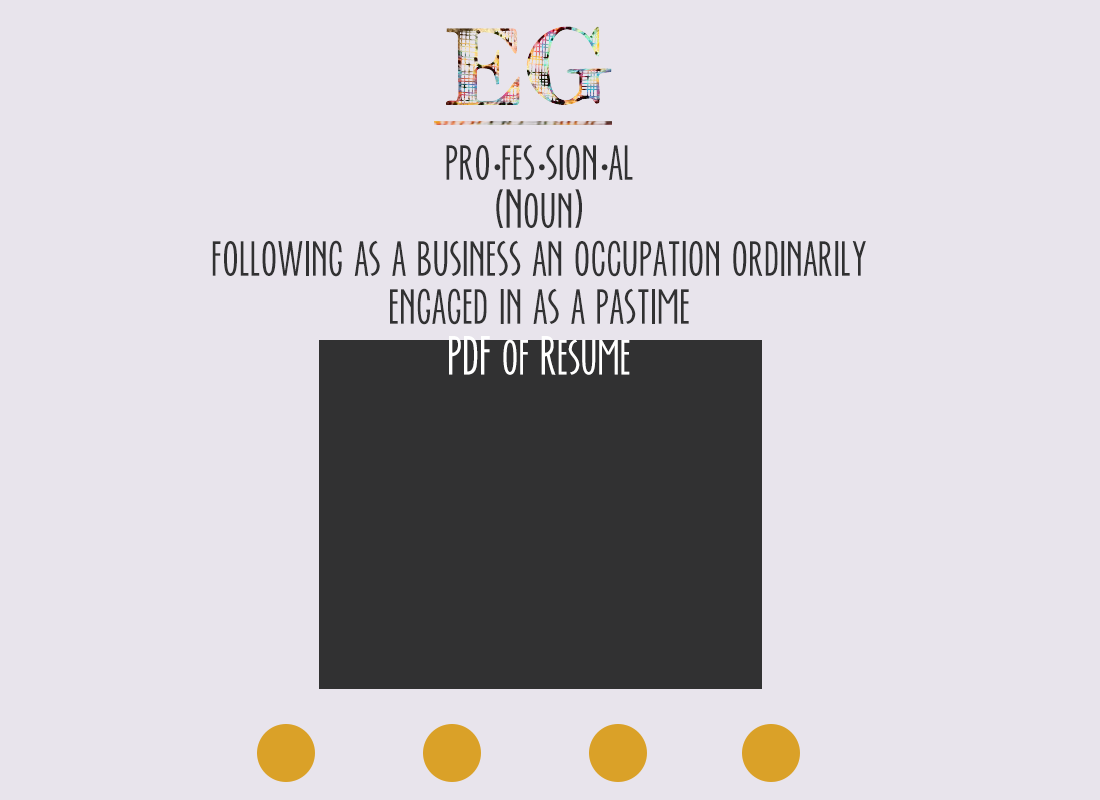
<style>
.page{position:relative;width:1100px;height:800px;background:#e8e4ec}
.page>*{position:absolute;margin:0}
.t1{font:48px/24px "EverAfter";color:#313132}
.t2{font:48px/24px "MyriadPro-Regular";color:#313132}
.t3{font:48px "EverAfter";color:#ffffff}
</style>
<div class="page">
<p class="t1" style="left:212px;top:144px;width:654px;height:181px;text-align:center">pro<span class="t2">·</span>fes<span class="t2">·</span>sion<span class="t2">·</span>al<br><br>(Noun)<br><br>following as a business an occupation ordinarily <br><br>engaged in as a pastime</p>
<p class="t3" style="left:449px;top:336px;width:181px;height:39px">PDF of Resume</p>
</div>
